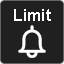
<style>
.page{position:relative;width:64px;height:64px;background:#202020}
.page>*{position:absolute;margin:0}
.t1{font:16px "Arial-BoldMT";color:#ffffff}
</style>
<div class="page">
<p class="t1" style="left:14px;top:9px;width:37px;height:12px">Limit</p>
</div>
